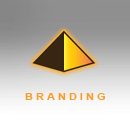
<style>
.page{position:relative;width:130px;height:130px}
.page>*{position:absolute;margin:0}
.t1{font:10px "Arial-BoldMT";letter-spacing:0.32em;color:#f59f30;scale:1.05 1}
</style>
<div class="page">
<p class="t1" style="left:25px;top:93px;width:80px;height:7px">BRANDING</p>
</div>
